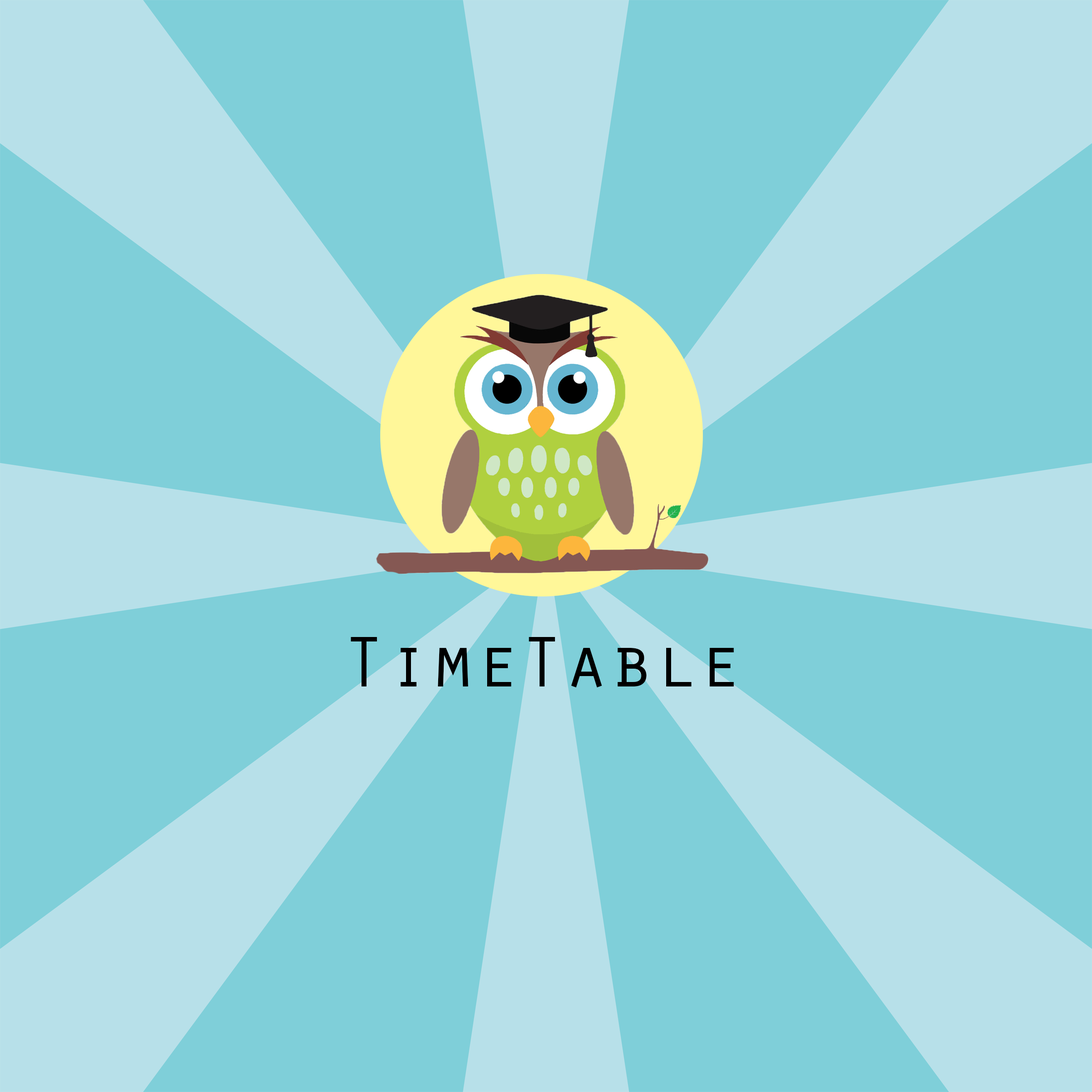
<style>
.page{position:relative;width:1092px;height:1092px;background:#7fcfd9}
.page>*{position:absolute;margin:0}
.t1{font:74.2px "OratorStd";color:#000000}
</style>
<div class="page">
<p class="t1" style="left:351px;top:637px;width:383px;height:50px">TimeTable</p>
</div>
